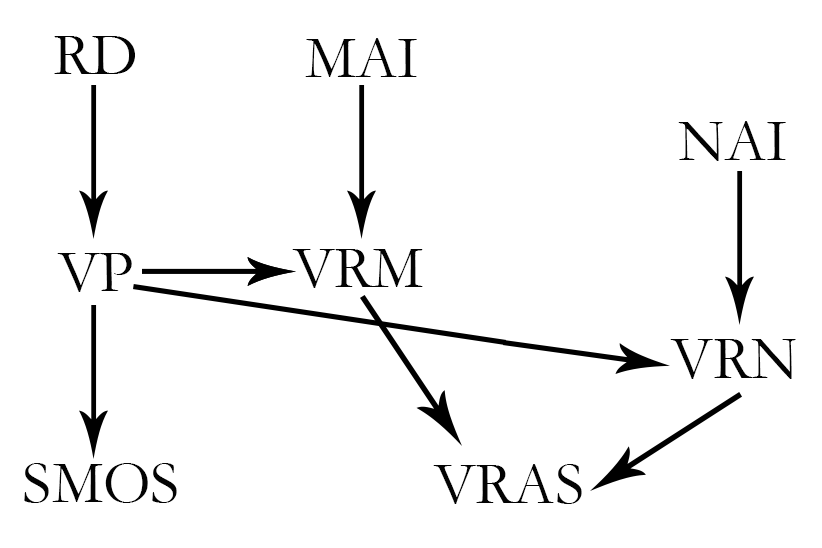
<style>
.page{position:relative;width:822px;height:548px;background:#ffffff}
.page>*{position:absolute;margin:0}
.t1{font:61.1px "Garamond";color:#030303}
.t2{font:61.5px "Garamond";color:#030303}
</style>
<div class="page">
<p class="t1" style="left:54px;top:36px;width:81px;height:38px">RD</p>
<p class="t1" style="left:305px;top:38px;width:112px;height:39px">MAI</p>
<p class="t1" style="left:678px;top:121px;width:108px;height:40px">NAI</p>
<p class="t1" style="left:57px;top:253px;width:75px;height:39px">VP</p>
<p class="t1" style="left:292px;top:249px;width:131px;height:39px">VRM</p>
<p class="t2" style="left:670px;top:339px;width:126px;height:40px">VRN</p>
<p class="t1" style="left:24px;top:463px;width:153px;height:40px">SMOS</p>
<p class="t1" style="left:433px;top:464px;width:149px;height:40px">VRAS</p>
</div>
